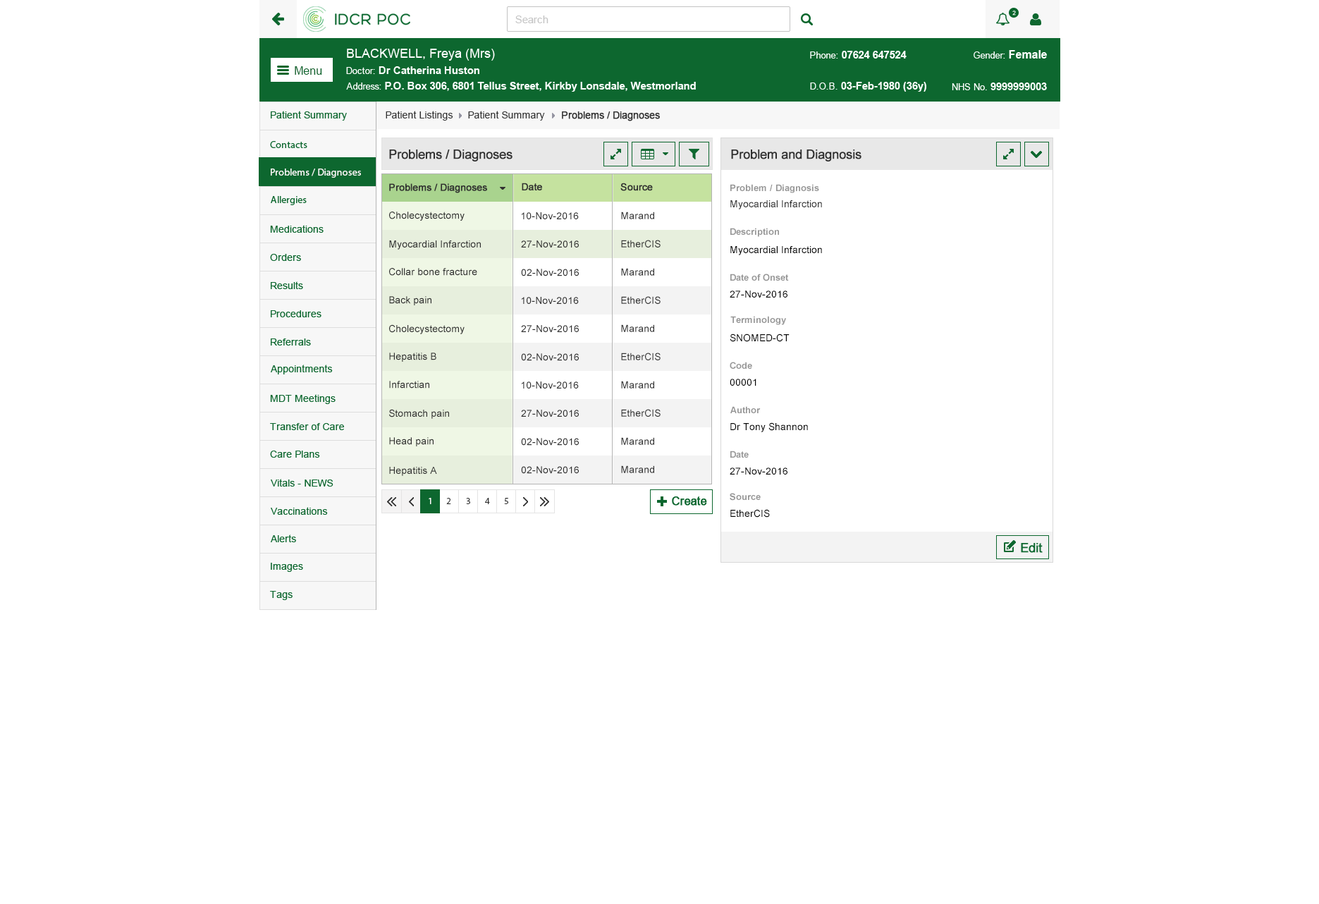
<style>
.page{position:relative;width:1319px;height:904px;background:#ffffff}
.page>*{position:absolute;margin:0}
.t1{font:9.9px "ArialMT";color:#313131}
.t2{font:9.9px "ArialMT";color:#313131;font-weight:bold}
.t3{font:12.7px "ArialMT";color:#303030;font-weight:bold}
.t4{font:9.9px "MyriadPro-Regular";color:#ffffff}
.t5{font:9.9px "ArialMT";color:#303030;font-weight:bold}
.t6{font:9.2px "Arial-BoldMT";color:#959595}
.t7{font:9.9px "ArialMT";color:#303030}
.t8{font:9.9px "ArialMT";color:#000000}
</style>
<div class="page">
<p class="t1" style="left:386px;top:111px;width:67px;height:10px">Patient Listings</p>
<p class="t1" style="left:468px;top:111px;width:77px;height:10px">Patient Summary</p>
<p class="t2" style="left:562px;top:111px;width:98px;height:10px">Problems / Diagnoses</p>
<p class="t3" style="left:389px;top:149px;width:124px;height:12px">Problems / Diagnoses</p>
<p class="t3" style="left:731px;top:149px;width:131px;height:12px">Problem and Diagnosis</p>
<p class="t4" style="left:271px;top:169px;width:90px;height:9px">Problems / Diagnoses</p>
<p class="t5" style="left:389px;top:183px;width:98px;height:10px">Problems / Diagnoses</p>
<p class="t5" style="left:522px;top:183px;width:20px;height:7px">Date</p>
<p class="t5" style="left:620px;top:183px;width:33px;height:8px">Source</p>
<p class="t6" style="left:730px;top:184px;width:89px;height:9px">Problem / Diagnosis</p>
<p class="t7" style="left:730px;top:200px;width:92px;height:9px">Myocardial Infarction</p>
<p class="t7" style="left:389px;top:212px;width:76px;height:9px">Cholecystectomy</p>
<p class="t7" style="left:521px;top:212px;width:58px;height:7px">10-Nov-2016</p>
<p class="t7" style="left:621px;top:212px;width:33px;height:7px">Marand</p>
<p class="t6" style="left:730px;top:228px;width:49px;height:9px">Description</p>
<p class="t7" style="left:389px;top:240px;width:92px;height:10px">Myocardial Infarction</p>
<p class="t7" style="left:521px;top:240px;width:58px;height:7px">27-Nov-2016</p>
<p class="t7" style="left:621px;top:240px;width:40px;height:7px">EtherCIS</p>
<p class="t8" style="left:730px;top:246px;width:92px;height:9px">Myocardial Infarction</p>
<p class="t7" style="left:389px;top:268px;width:88px;height:8px">Collar bone fracture</p>
<p class="t7" style="left:521px;top:269px;width:58px;height:7px">02-Nov-2016</p>
<p class="t7" style="left:621px;top:268px;width:33px;height:8px">Marand</p>
<p class="t6" style="left:730px;top:274px;width:59px;height:7px">Date of Onset</p>
<p class="t8" style="left:730px;top:290px;width:58px;height:8px">27-Nov-2016</p>
<p class="t7" style="left:389px;top:296px;width:43px;height:9px">Back pain</p>
<p class="t7" style="left:521px;top:297px;width:58px;height:7px">10-Nov-2016</p>
<p class="t7" style="left:621px;top:296px;width:40px;height:8px">EtherCIS</p>
<p class="t6" style="left:730px;top:316px;width:56px;height:9px">Terminology</p>
<p class="t7" style="left:389px;top:324px;width:76px;height:10px">Cholecystectomy</p>
<p class="t7" style="left:521px;top:325px;width:58px;height:7px">27-Nov-2016</p>
<p class="t7" style="left:621px;top:324px;width:33px;height:8px">Marand</p>
<p class="t8" style="left:730px;top:334px;width:60px;height:8px">SNOMED-CT</p>
<p class="t7" style="left:389px;top:353px;width:47px;height:9px">Hepatitis B</p>
<p class="t7" style="left:521px;top:353px;width:58px;height:8px">02-Nov-2016</p>
<p class="t7" style="left:621px;top:353px;width:40px;height:7px">EtherCIS</p>
<p class="t6" style="left:730px;top:362px;width:22px;height:7px">Code</p>
<p class="t7" style="left:389px;top:381px;width:40px;height:7px">Infarctian</p>
<p class="t7" style="left:521px;top:381px;width:58px;height:7px">10-Nov-2016</p>
<p class="t7" style="left:621px;top:381px;width:33px;height:7px">Marand</p>
<p class="t8" style="left:730px;top:379px;width:27px;height:7px">00001</p>
<p class="t7" style="left:389px;top:409px;width:60px;height:10px">Stomach pain</p>
<p class="t7" style="left:521px;top:410px;width:58px;height:7px">27-Nov-2016</p>
<p class="t7" style="left:621px;top:409px;width:40px;height:8px">EtherCIS</p>
<p class="t6" style="left:730px;top:406px;width:31px;height:7px">Author</p>
<p class="t8" style="left:730px;top:422px;width:78px;height:10px">Dr Tony Shannon</p>
<p class="t7" style="left:389px;top:437px;width:45px;height:9px">Head pain</p>
<p class="t7" style="left:521px;top:438px;width:58px;height:8px">02-Nov-2016</p>
<p class="t7" style="left:621px;top:437px;width:33px;height:8px">Marand</p>
<p class="t6" style="left:730px;top:451px;width:19px;height:7px">Date</p>
<p class="t7" style="left:389px;top:467px;width:48px;height:9px">Hepatitis A</p>
<p class="t7" style="left:521px;top:466px;width:58px;height:8px">02-Nov-2016</p>
<p class="t7" style="left:621px;top:465px;width:33px;height:8px">Marand</p>
<p class="t8" style="left:730px;top:467px;width:58px;height:8px">27-Nov-2016</p>
<p class="t6" style="left:730px;top:493px;width:31px;height:8px">Source</p>
<p class="t8" style="left:730px;top:509px;width:40px;height:9px">EtherCIS</p>
</div>
